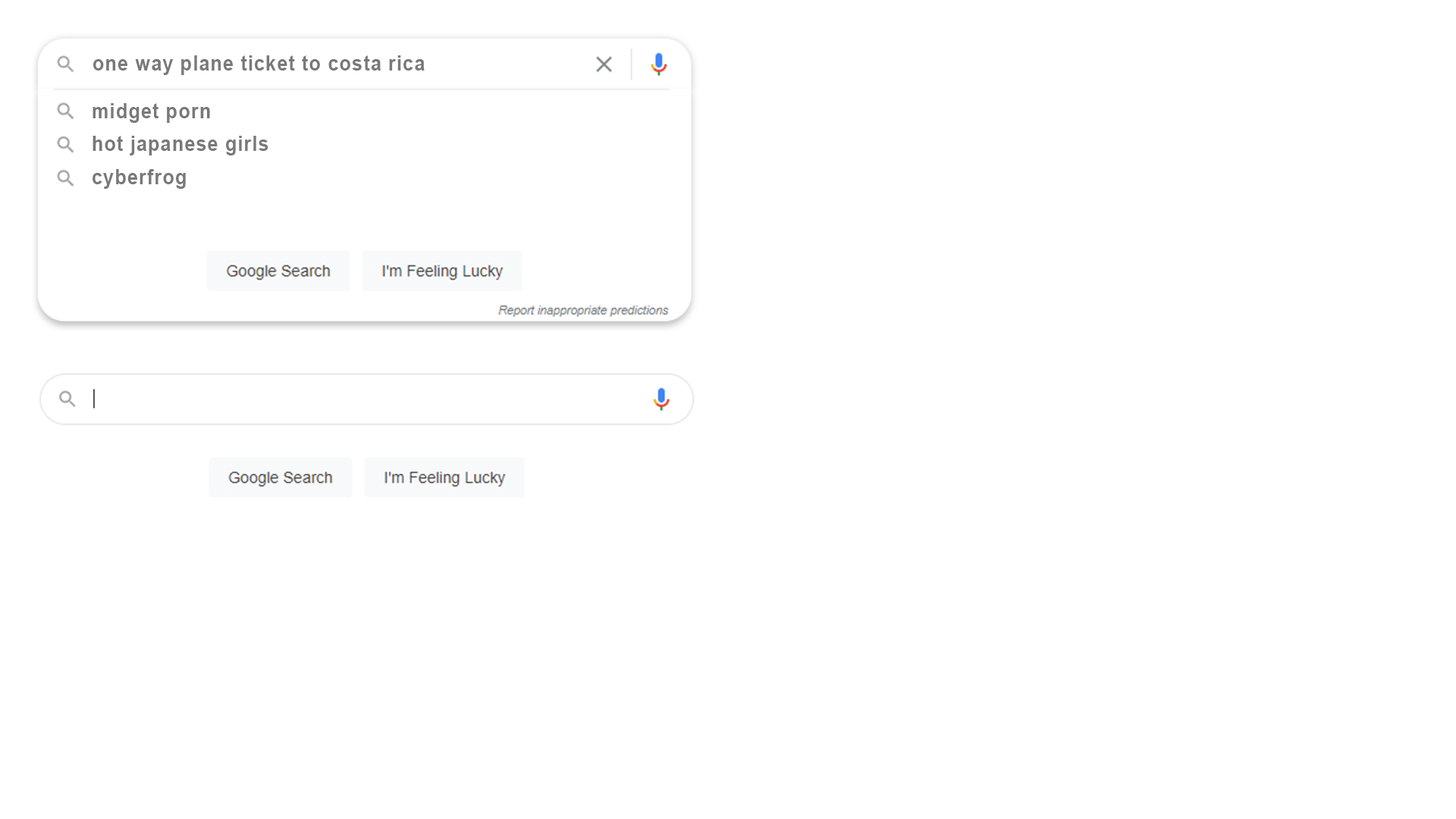
<style>
.page{position:relative;width:1456px;height:819px;background:#ffffff}
.page>*{position:absolute;margin:0}
.t1{font:21.4px "Arial-BoldMT";letter-spacing:0.04em;color:#797979;scale:0.9 1}
.t2{font:21.4px/33px "Arial-BoldMT";letter-spacing:0.04em;color:#797979;scale:0.9 1}
</style>
<div class="page">
<p class="t1" style="left:93px;top:55px;width:332px;height:20px">one way plane ticket to costa rica</p>
<p class="t2" style="left:93px;top:103px;width:175px;height:86px">midget porn<br>hot japanese girls<br>cyberfrog</p>
</div>
